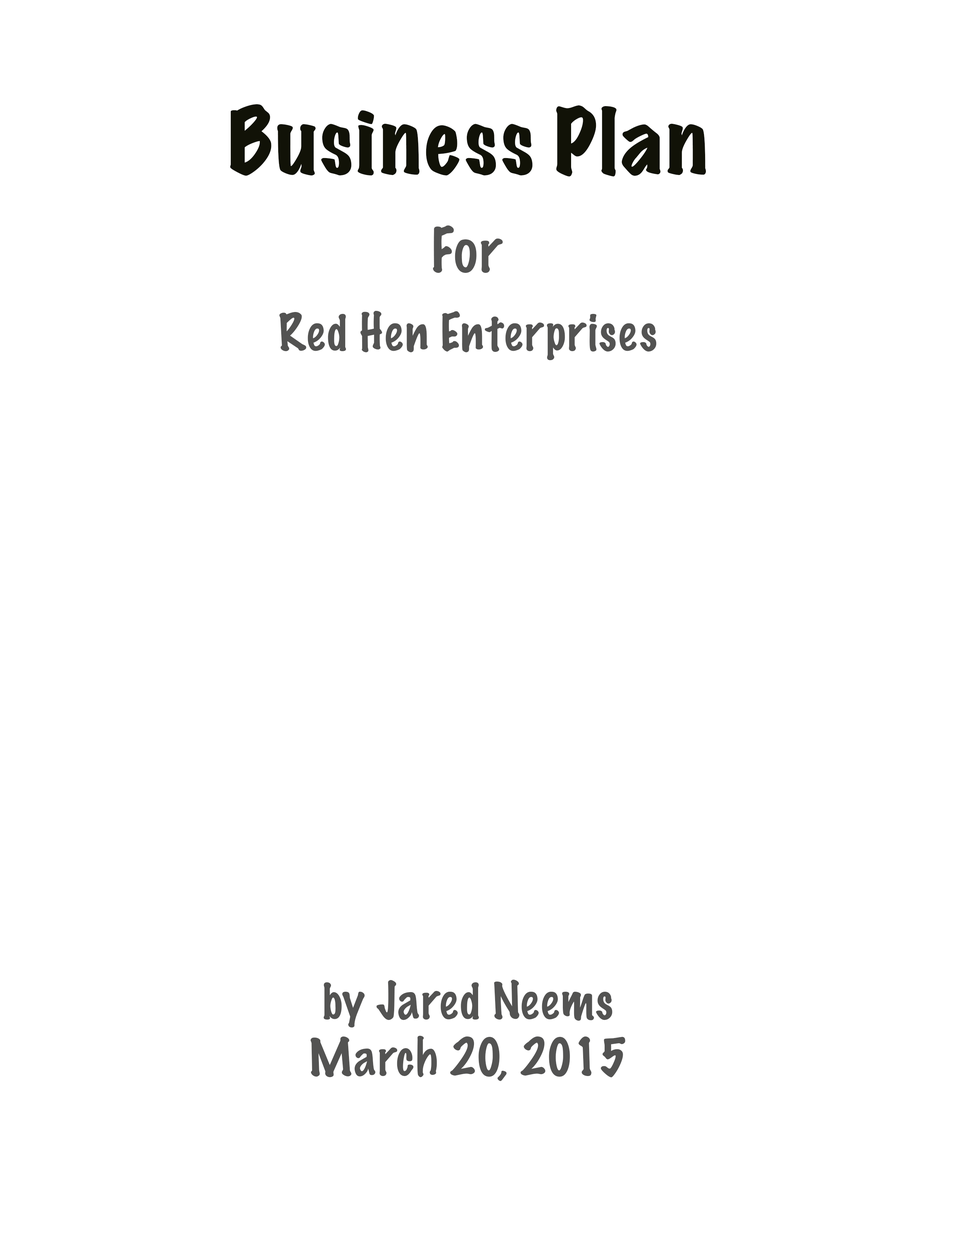
<style>
.page{position:relative;width:960px;height:1242px;background:#ffffff}
.page>*{position:absolute;margin:0}
.t1{font:81.6px "MarkerFelt-Wide";color:#111207}
.t2{font:56.5px "MarkerFelt-Thin";color:#535352}
.t3{font:47.1px "MarkerFelt-Thin";color:#535352}
</style>
<div class="page">
<p class="t1" style="left:230px;top:104px;width:476px;height:73px">Business Plan</p>
<p class="t2" style="left:433px;top:225px;width:70px;height:48px">For</p>
<p class="t3" style="left:279px;top:311px;width:378px;height:49px">Red Hen Enterprises</p>
<p class="t3" style="left:311px;top:980px;width:314px;height:101px;text-align:center">by Jared Neems<br>March 20, 2015</p>
</div>
